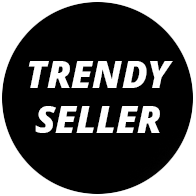
<style>
.page{position:relative;width:196px;height:196px;background:#000000}
.page>*{position:absolute;margin:0}
.t1{font:37.5px "NotoSans-BlackItalic";color:#ffffff}
</style>
<div class="page">
<p class="t1" style="left:28px;top:61px;width:145px;height:72px;text-align:center">TRENDY<br>SELLER</p>
</div>
